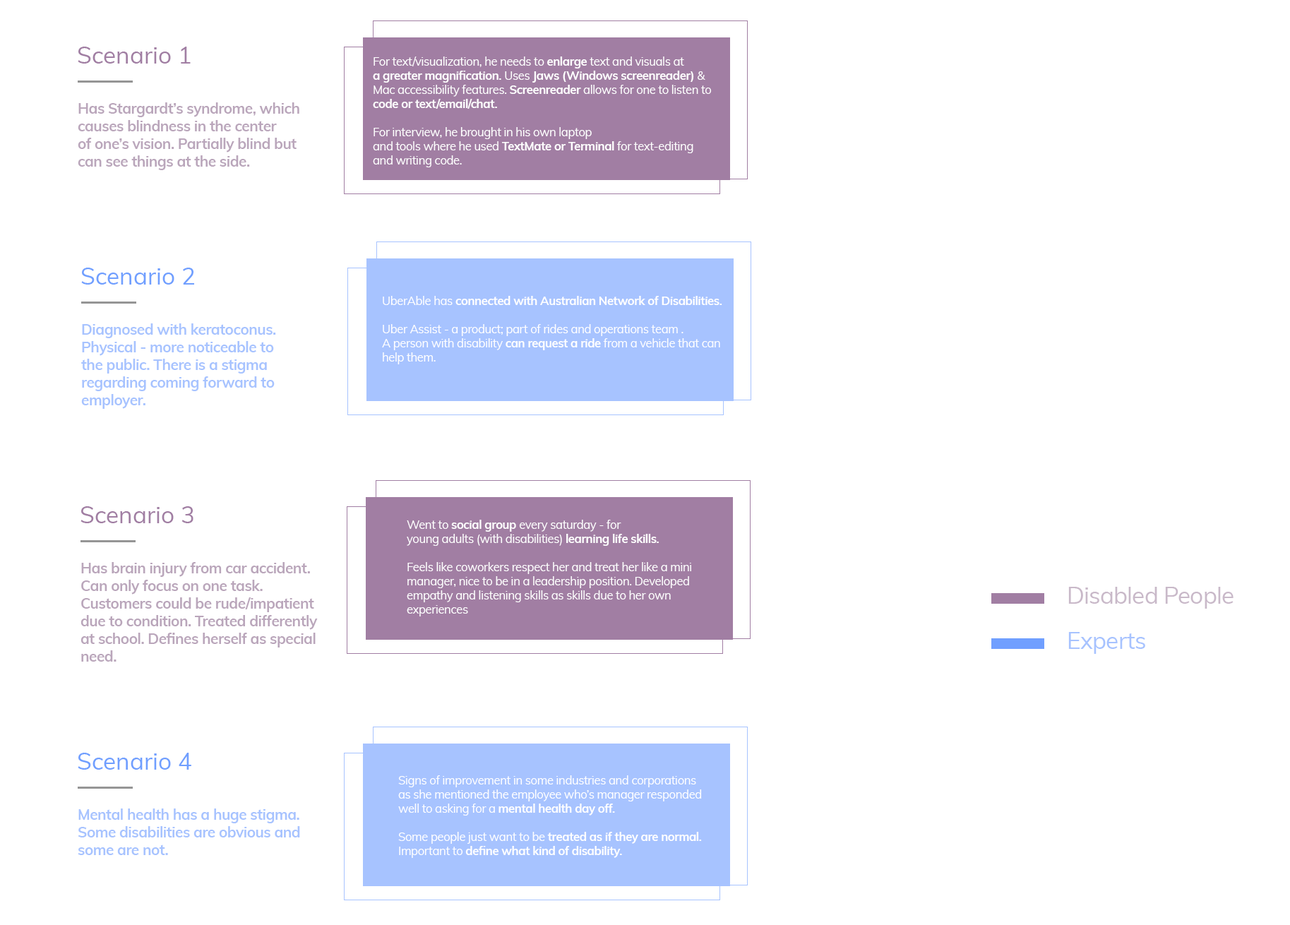
<style>
.page{position:relative;width:1290px;height:925px;background:#ffffff}
.page>*{position:absolute;margin:0}
.t1{font:23.5px "Muli-Regular";color:#a17ea3}
.t2{font:11.8px "Muli-Regular";letter-spacing:-0.025em;color:#ffffff}
.t3{font:11.8px "Muli-Bold";letter-spacing:-0.025em;color:#ffffff}
.t4{font:14.7px "Muli-Bold";letter-spacing:-0.025em;color:#baa6bb}
.t5{font:23.5px "Muli-Regular";color:#709fff}
.t6{font:14.7px "Muli-Bold";letter-spacing:-0.025em;color:#a7c3ff}
.t7{font:23.5px "Muli-Regular";letter-spacing:-0.025em;color:#c9b9c9}
.t8{font:23.5px "Muli-Regular";letter-spacing:-0.025em;color:#a7c3ff}
</style>
<div class="page">
<p class="t1" style="left:78px;top:47px;width:113px;height:17px">Scenario 1</p>
<p class="t2" style="left:373px;top:56px;width:338px;height:111px">For text/visualization, he needs to <span class="t3">enlarge</span> text and visuals at <br><span class="t3">a greater magnification. </span>Uses <span class="t3">Jaws (Windows screenreader) </span>&amp; <br>Mac accessibility features. <span class="t3">Screenreader</span> allows for one to listen to <br><span class="t3">code or text/email/chat.<br></span><br>For interview, he brought in his own laptop <br>and tools where he used <span class="t3">TextMate or Terminal</span> for text-editing<br>and writing code.</p>
<p class="t4" style="left:78px;top:102px;width:221px;height:68px">Has Stargardt’s syndrome, which <br>causes blindness in the center<br>of one’s vision. Partially blind but <br>can see things at the side.</p>
<p class="t5" style="left:81px;top:268px;width:113px;height:16px">Scenario 2</p>
<p class="t2" style="left:382px;top:296px;width:340px;height:68px">UberAble has<span class="t3"> connected with Australian Network of Disabilities.<br></span><br>Uber Assist - a product; part of rides and operations team .<br>A person with disability <span class="t3">can request a ride</span> from a vehicle that can <br>help them.</p>
<p class="t6" style="left:81px;top:323px;width:195px;height:86px">Diagnosed with keratoconus.<br>Physical - more noticeable to <br>the public. There is a stigma <br>regarding coming forward to <br>employer.</p>
<p class="t1" style="left:80px;top:506px;width:113px;height:17px">Scenario 3</p>
<p class="t2" style="left:407px;top:520px;width:284px;height:96px">Went to <span class="t3">social group </span>every saturday - for<br>young adults (with disabilities) <span class="t3">learning life skills.<br></span><br>Feels like coworkers respect her and treat her like a mini <br>manager, nice to be in a leadership position. Developed <br>empathy and listening skills as skills due to her own <br>experiences</p>
<p class="t4" style="left:80px;top:562px;width:238px;height:99px">Has brain injury from car accident.<br>Can only focus on one task.<br>Customers could be rude/impatient<br>due to condition. Treated differently<br>at school. Defines herself as special<br>need.</p>
<p class="t7" style="left:1068px;top:587px;width:165px;height:21px">Disabled People</p>
<p class="t8" style="left:1068px;top:632px;width:77px;height:22px">Experts</p>
<p class="t5" style="left:78px;top:752px;width:113px;height:17px">Scenario 4</p>
<p class="t2" style="left:398px;top:775px;width:304px;height:83px">Signs of improvement in some industries and corporations <br>as she mentioned the employee who’s manager responded<br>well to asking for a <span class="t3">mental health day off.<br></span><br>Some people just want to be <span class="t3">treated as if they are normal.<br></span>Important to <span class="t3">define what kind of disability.</span></p>
<p class="t6" style="left:78px;top:808px;width:222px;height:47px">Mental health has a huge stigma.<br>Some disabilities are obvious and<br>some are not.</p>
</div>
